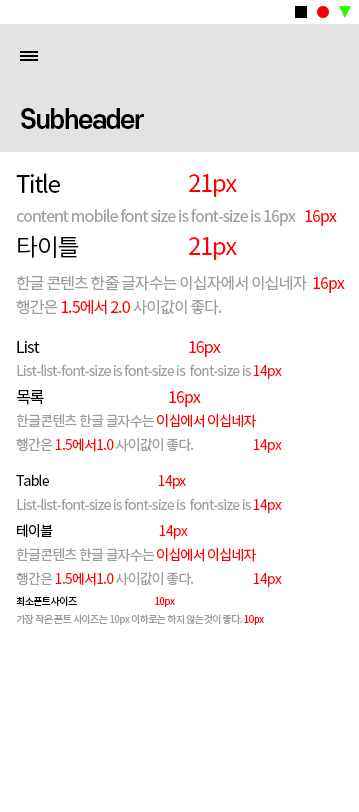
<style>
.page{position:relative;width:359px;height:812px;background:#ffffff}
.page>*{position:absolute;margin:0}
.t1{font:26px "S-CoreDream-6Bold";letter-spacing:-0.055em;color:#000000}
.t2{font:24px "NotoSansCJKkr-Regular";letter-spacing:-0.055em;color:#000000}
.t3{font:24px "NotoSansCJKkr-Regular";letter-spacing:-0.055em;color:#ff0000}
.t4{font:16px "NotoSansCJKkr-Regular";letter-spacing:-0.055em;color:#9e9e9e}
.t5{font:16px "NotoSansCJKkr-Regular";letter-spacing:-0.055em;color:#ff0000}
.t6{font:16px/24px "NotoSansCJKkr-Regular";letter-spacing:-0.055em;color:#9e9e9e}
.t7{font:16px/24px "NotoSansCJKkr-Regular";letter-spacing:-0.055em;color:#ff0000}
.t8{font:16px "NotoSansCJKkr-Regular";letter-spacing:-0.055em;color:#000000}
.t9{font:14px "NotoSansCJKkr-Regular";letter-spacing:-0.055em;color:#9e9e9e}
.t10{font:14px "NotoSansCJKkr-Regular";letter-spacing:-0.055em;color:#ff0000}
.t11{font:14px/24px "NotoSansCJKkr-Regular";letter-spacing:-0.055em;color:#9e9e9e}
.t12{font:14px/24px "NotoSansCJKkr-Regular";letter-spacing:-0.055em;color:#ff0000}
.t13{font:14px "NotoSansCJKkr-Regular";letter-spacing:-0.055em;color:#000000}
.t14{font:10px "NotoSansCJKkr-Regular";letter-spacing:-0.055em;color:#000000}
.t15{font:10px "NotoSansCJKkr-Regular";letter-spacing:-0.055em;color:#ff0000}
.t16{font:10px "NotoSansCJKkr-Regular";letter-spacing:-0.055em;color:#9e9e9e}
</style>
<div class="page">
<p class="t1" style="left:21px;top:108px;width:123px;height:21px">Subheader</p>
<p class="t2" style="left:16px;top:173px;width:44px;height:20px">Title</p>
<p class="t3" style="left:189px;top:174px;width:48px;height:23px">21px</p>
<p class="t4" style="left:17px;top:208px;width:279px;height:18px">content mobile font size is font-size is 16px</p>
<p class="t5" style="left:305px;top:210px;width:32px;height:16px">16px</p>
<p class="t2" style="left:18px;top:236px;width:61px;height:22px">타이틀</p>
<p class="t3" style="left:189px;top:237px;width:48px;height:23px">21px</p>
<p class="t6" style="left:16px;top:275px;width:291px;height:40px">한글 콘텐츠 한줄 글자수는 이십자에서 이십네자<br>행간은 <span class="t7">1.5에서 2.0</span> 사이값이 좋다.</p>
<p class="t5" style="left:313px;top:277px;width:32px;height:16px">16px</p>
<p class="t8" style="left:17px;top:340px;width:204px;height:17px">List                                                       <span class="t5">16px</span></p>
<p class="t9" style="left:17px;top:364px;width:265px;height:15px">List-list-font-size is font-size is  font-size is <span class="t10">14px</span></p>
<p class="t5" style="left:16px;top:390px;width:185px;height:17px"><span class="t8">목록                                              </span>16px</p>
<p class="t11" style="left:16px;top:414px;width:266px;height:39px">한글콘텐츠 한글 글자수는 <span class="t12">이십에서 이십네자<br></span>행간은<span class="t12"> 1.5에서1.0 </span>사이값이 좋다.                         <span class="t12">14px</span></p>
<p class="t13" style="left:16px;top:474px;width:170px;height:15px">Table                                              <span class="t10">14px</span></p>
<p class="t9" style="left:17px;top:498px;width:265px;height:15px">List-list-font-size is font-size is  font-size is <span class="t10">14px</span></p>
<p class="t10" style="left:17px;top:524px;width:171px;height:15px"><span class="t13">테이블                                             </span>14px</p>
<p class="t11" style="left:16px;top:548px;width:266px;height:39px">한글콘텐츠 한글 글자수는 <span class="t12">이십에서 이십네자<br></span>행간은<span class="t12"> 1.5에서1.0 </span>사이값이 좋다.                         <span class="t12">14px</span></p>
<p class="t14" style="left:16px;top:596px;width:159px;height:11px">최소폰트사이즈                                              <span class="t15">10px</span></p>
<p class="t16" style="left:16px;top:614px;width:248px;height:11px">가장 작은 폰트 사이즈는 10px 이하로는 하지 않는것이 좋다. <span class="t15">10px</span></p>
</div>
